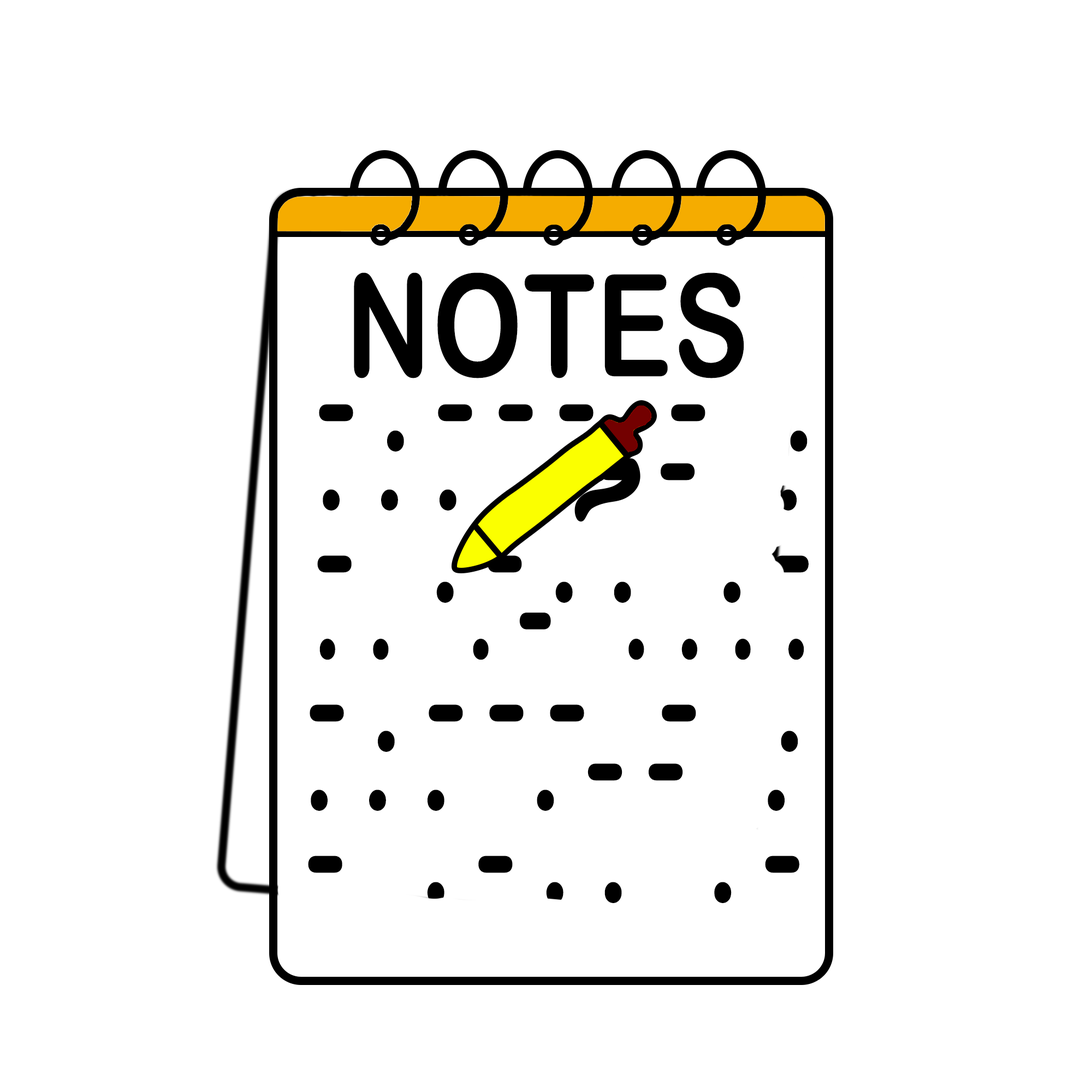
<style>
.page{position:relative;width:1092px;height:1092px;background:#ffffff}
.page>*{position:absolute;margin:0}
.t1{font:142.2px "ArialRoundedMTBold";letter-spacing:0.01em;color:#000000;scale:0.8 1}
.t2{font:142.2px "ArialRoundedMTBold";letter-spacing:0.2em;color:#000000;scale:0.8 1}
.t3{font:142.2px "ArialRoundedMTBold";letter-spacing:0.2em;color:#000000;scale:0.73 1}
</style>
<div class="page">
<p class="t1" style="left:354px;top:272px;width:390px;height:106px">NOTES</p>
<p class="t2" style="left:319px;top:404px;width:489px;height:48px">-.--- - .</p>
<p class="t2" style="left:323px;top:463px;width:474px;height:48px">... .-- .</p>
<p class="t2" style="left:317px;top:555px;width:492px;height:48px">- .-.. .-</p>
<p class="t3" style="left:319px;top:613px;width:485px;height:47px">.. .- ....</p>
<p class="t2" style="left:310px;top:704px;width:488px;height:48px">-.--- - .</p>
<p class="t2" style="left:311px;top:763px;width:474px;height:48px">... .-- .</p>
<p class="t2" style="left:308px;top:856px;width:491px;height:47px">- .-.. .-</p>
</div>
